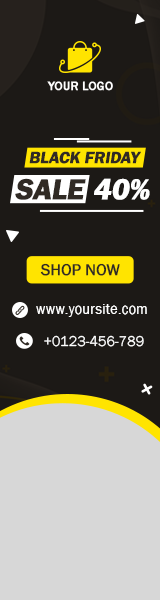
<style>
.page{position:relative;width:160px;height:600px;background:#1c1916}
.page>*{position:absolute;margin:0}
.t1{font:12.4px "FranklinGothic-Medium";color:#ffffff;font-weight:bold}
.t2{font:16.9px "FranklinGothic-Demi";letter-spacing:-0.015em;color:#302a24;font-weight:bold}
.t3{font:30.1px "FranklinGothic-Demi";letter-spacing:-0.015em;color:#302a24;font-weight:bold}
.t4{font:30.1px "FranklinGothic-Demi";letter-spacing:-0.015em;color:#ffffff;font-weight:bold}
.t5{font:16.4px "FranklinGothic-Book";letter-spacing:-0.015em;color:#302a24;font-weight:bold}
.t6{font:14.7px "FranklinGothic-Book";letter-spacing:0.015em;color:#ffffff}
.t7{font:14.7px "FranklinGothic-Book";color:#ffffff}
</style>
<div class="page">
<p class="t1" style="left:47px;top:81px;width:66px;height:10px">YOUR LOGO</p>
<p class="t2" style="left:29px;top:151px;width:112px;height:13px">BLACK FRIDAY</p>
<p class="t3" style="left:15px;top:178px;width:71px;height:22px">SALE</p>
<p class="t4" style="left:94px;top:178px;width:56px;height:22px">40%</p>
<p class="t5" style="left:40px;top:263px;width:80px;height:13px">SHOP NOW</p>
<p class="t6" style="left:36px;top:304px;width:111px;height:13px">www.yoursite.com</p>
<p class="t7" style="left:44px;top:335px;width:100px;height:12px">+0123-456-789</p>
</div>
